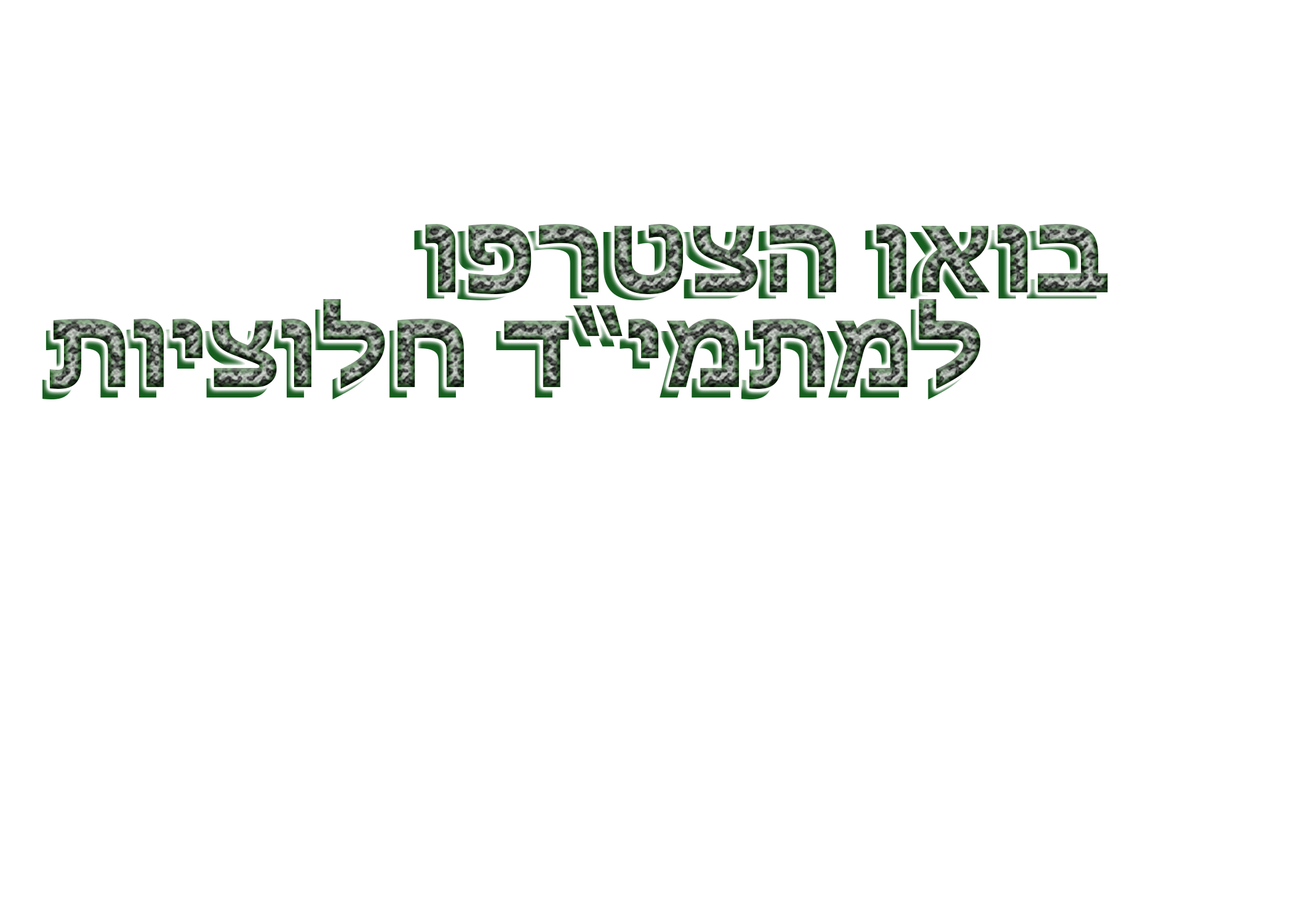
<style>
.page{position:relative;width:1292px;height:923px;background:#ffffff}
.page>*{position:absolute;margin:0}
.t1{font:107.7px "Tahoma-Bold"}
.t2{font:107.8px "Tahoma-Bold"}
</style>
<div class="page">
<p class="t1" style="left:414px;top:230px;width:683px;height:70px">בואו הצטרפו</p>
<p class="t2" style="left:425px;top:224px;width:683px;height:70px">בואו הצטרפו</p>
<p class="t2" style="left:50px;top:299px;width:931px;height:90px">למתמי”ד חלוציות</p>
<p class="t1" style="left:42px;top:309px;width:931px;height:90px">למתמי”ד חלוציות</p>
</div>
